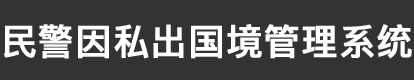
<style>
.page{position:relative;width:414px;height:80px;background:#333333}
.page>*{position:absolute;margin:0}
.t1{font:36px "PingFangSC-Medium";letter-spacing:0.02em;color:#ffffff;font-weight:bold}
</style>
<div class="page">
<p class="t1" style="left:4px;top:24px;width:408px;height:35px">民警因私出国境管理系统</p>
</div>
